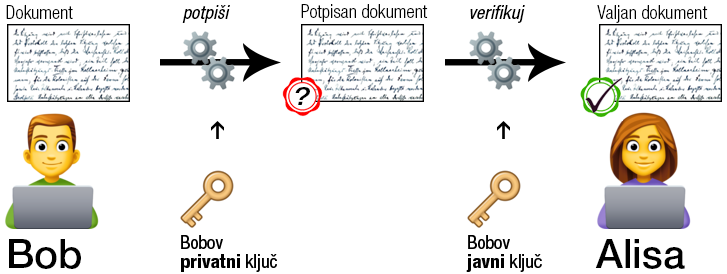
<style>
.page{position:relative;width:727px;height:274px;background:#ffffff}
.page>*{position:absolute;margin:0}
.t1{font:18.7px "HelveticaNeueLTStd-LtCn";color:#000000}
.t2{font:18.7px "HelveticaNeueLTStd-CnO";color:#000000}
.t3{font:24px "HelveticaNeueLTStd-MdExO";color:#000000}
.t4{font:40px "HelveticaNeueLTStd-Md";color:#000000}
</style>
<div class="page">
<p class="t1" style="left:6px;top:5px;width:67px;height:14px">Dokument</p>
<p class="t2" style="left:182px;top:5px;width:48px;height:18px">potpiši</p>
<p class="t1" style="left:301px;top:4px;width:127px;height:18px">Potpisan dokument</p>
<p class="t2" style="left:470px;top:5px;width:55px;height:18px">verifikuj</p>
<p class="t1" style="left:597px;top:5px;width:111px;height:18px">Valjan dokument</p>
<p class="t3" style="left:295px;top:87px;width:15px;height:18px">?</p>
<p class="t4" style="left:9px;top:239px;width:72px;height:30px">Bob</p>
<p class="t4" style="left:595px;top:239px;width:90px;height:30px">Alisa</p>
</div>
